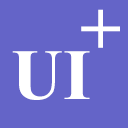
<style>
.page{position:relative;width:128px;height:128px;background:#6464c8}
.page>*{position:absolute;margin:0}
.t1{font:71.6px "TimesNewRomanPS-BoldMT";color:#ffffff}
.t2{font:72px "TimesNewRomanPS-BoldMT";color:#ffffff}
</style>
<div class="page">
<p class="t1" style="left:81px;top:9px;width:39px;height:39px">+</p>
<p class="t2" style="left:12px;top:51px;width:78px;height:49px">UI</p>
</div>
